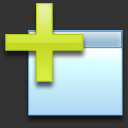
<style>
.page{position:relative;width:128px;height:128px;background:#333333}
.page>*{position:absolute;margin:0}
.t1{font:180px "Courier-Bold"}
</style>
<div class="page">
<p class="t1" style="left:5px;top:3px;width:79px;height:79px">+</p>
</div>
